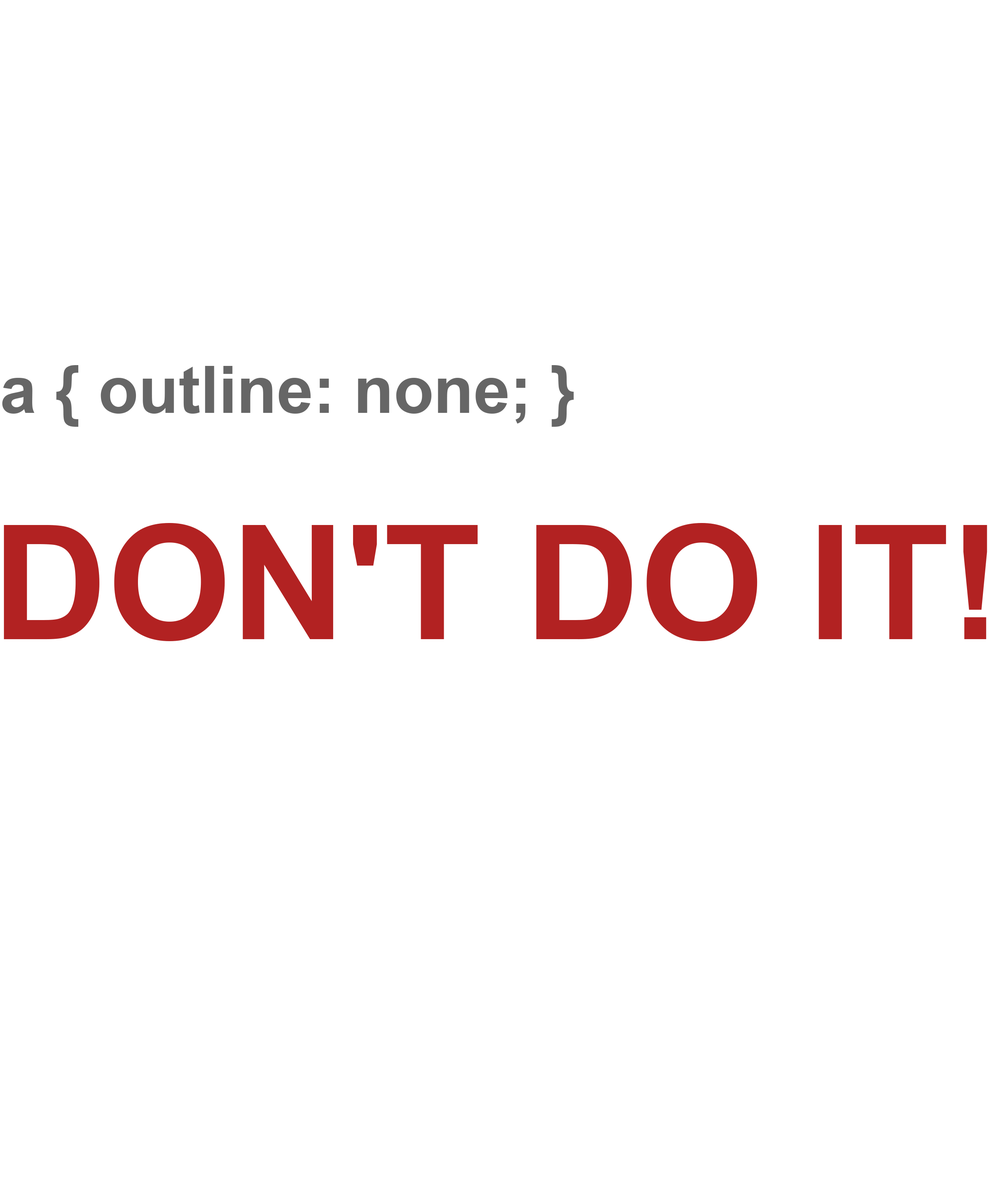
<style>
.page{position:relative;width:1002px;height:1190px;background:#ffffff}
.page>*{position:absolute;margin:0}
.t1{font:65.6px "Arial-BoldMT";color:#666666}
.t2{font:159.1px "Arial-BoldMT";color:#b22222}
</style>
<div class="page">
<p class="t1" style="left:2px;top:365px;width:572px;height:62px">a { outline: none; }</p>
<p class="t2" style="left:4px;top:523px;width:983px;height:118px">DON'T DO IT!</p>
</div>
